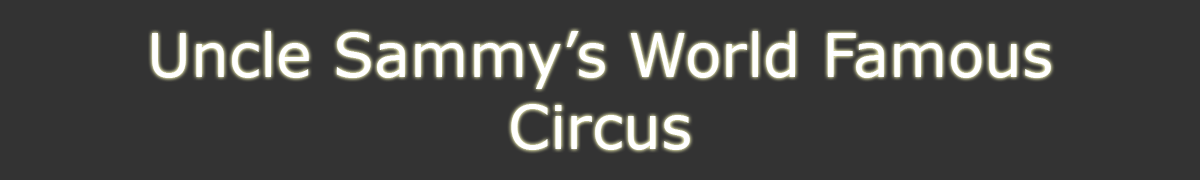
<style>
.page{position:relative;width:1200px;height:180px;background:#333333}
.page>*{position:absolute;margin:0}
.t1{font:60px "Verdana";color:#ffffff}
</style>
<div class="page">
<p class="t1" style="left:152px;top:31px;width:899px;height:119px;text-align:center">Uncle Sammy’s World Famous Circus</p>
</div>
